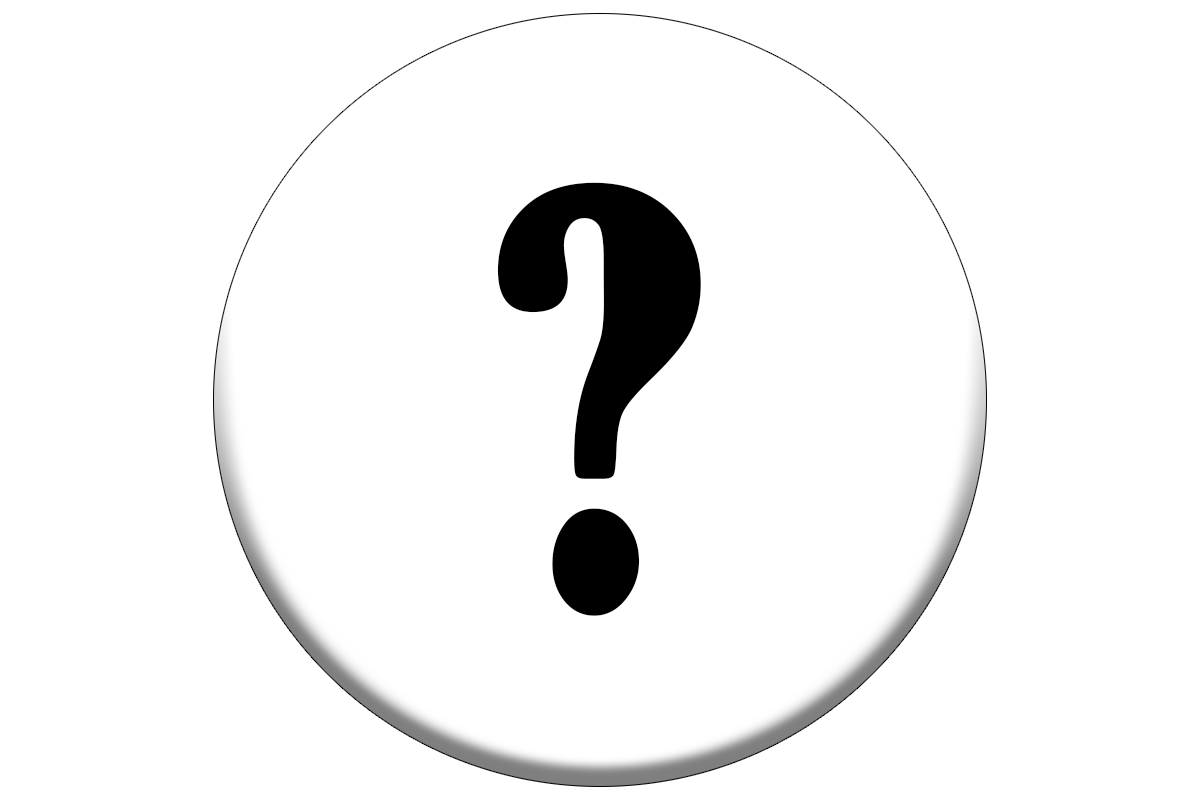
<style>
.page{position:relative;width:1200px;height:800px;background:#ffffff}
.page>*{position:absolute;margin:0}
.t1{font:535.6px "BernardMT-Condensed";color:#000000}
</style>
<div class="page">
<p class="t1" style="left:497px;top:182px;width:204px;height:434px">?</p>
</div>
